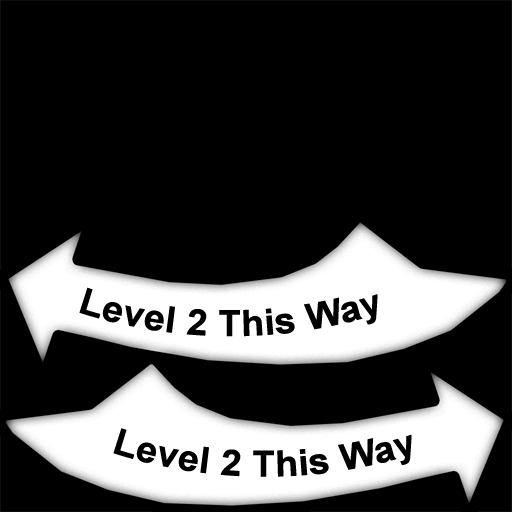
<style>
.page{position:relative;width:512px;height:512px;background:#000000}
.page>*{position:absolute;margin:0}
.t1{font:36px "Arial-BoldMT";color:#000000}
</style>
<div class="page">
<p class="t1" style="left:79px;top:287px;width:299px;height:50px">Level 2 This Way</p>
<p class="t1" style="left:113px;top:428px;width:299px;height:49px">Level 2 This Way</p>
</div>
